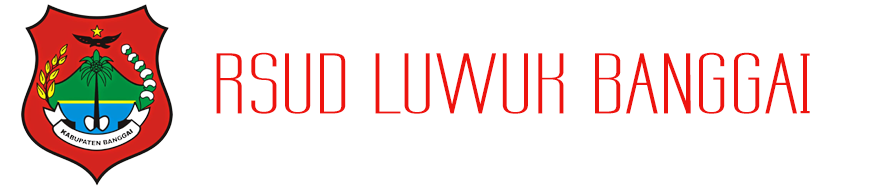
<style>
.page{position:relative;width:872px;height:192px;background:#ffffff}
.page>*{position:absolute;margin:0}
.t1{font:74.6px "LabtopSecundoWide";color:#ee130e;scale:1.09 1}
</style>
<div class="page">
<p class="t1" style="left:216px;top:52px;width:594px;height:62px">RSUD LUWUK BANGGAI</p>
</div>
